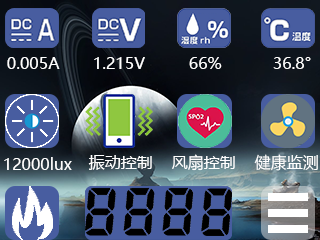
<style>
.page{position:relative;width:320px;height:240px}
.page>*{position:absolute;margin:0}
.t1{font:16px "MicrosoftYaHei";color:#ffffff;font-variant:small-caps}
.t2{font:16px "MicrosoftYaHei";color:#ffffff}
</style>
<div class="page">
<p class="t1" style="left:7px;top:57px;width:53px;height:12px">0.005A</p>
<p class="t1" style="left:94px;top:57px;width:51px;height:12px">1.215V</p>
<p class="t1" style="left:189px;top:57px;width:33px;height:12px">66%</p>
<p class="t1" style="left:273px;top:57px;width:38px;height:12px">36.8°</p>
<p class="t1" style="left:4px;top:157px;width:68px;height:13px">12000<span class="t2">lux</span></p>
<p class="t1" style="left:88px;top:155px;width:64px;height:15px">振动控制</p>
<p class="t1" style="left:172px;top:154px;width:63px;height:17px">风扇控制</p>
<p class="t1" style="left:254px;top:154px;width:64px;height:17px">健康监测</p>
</div>
